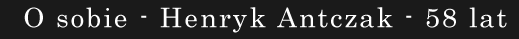
<style>
.page{position:relative;width:519px;height:39px;background:#1a1a1a}
.page>*{position:absolute;margin:0}
.t1{font:27px "Century";letter-spacing:0.075em;color:#ffffff}
.t2{font:21.9px "LucidaConsole";letter-spacing:0.075em;color:#ffffff;font-weight:bold}
</style>
<div class="page">
<p class="t1" style="left:24px;top:7px;width:483px;height:26px"><span class="t2"><br><br></span>O sobie - Henryk Antczak - 58 lat</p>
</div>
